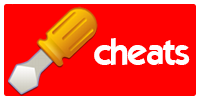
<style>
.page{position:relative;width:200px;height:100px;background:#ff0000}
.page>*{position:absolute;margin:0}
.t1{font:36px "ELEGANCE";color:#ffffff}
</style>
<div class="page">
<p class="t1" style="left:94px;top:38px;width:96px;height:27px">cheats</p>
</div>
